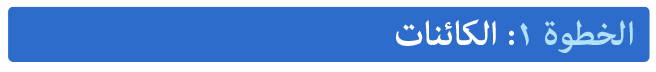
<style>
.page{position:relative;width:656px;height:72px;background:#2d6ccb}
.page>*{position:absolute;margin:0}
.t1{font:48px "AdobeArabic-Bold";color:#ffffff}
.t2{font:48px "AdobeArabic-Bold";color:#b0e1f9}
</style>
<div class="page">
<p class="t1" style="left:396px;top:19px;width:237px;height:34px"><span class="t2">الخطوة ١</span>: الكائنات</p>
</div>
